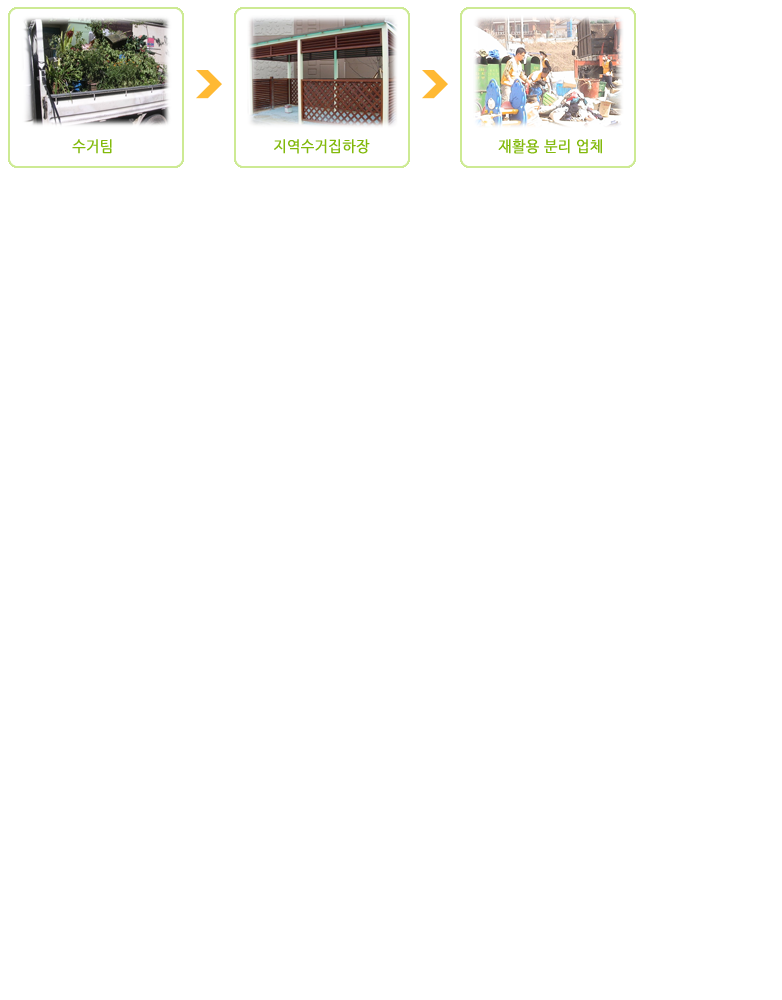
<style>
.page{position:relative;width:782px;height:1000px;background:#ffffff}
.page>*{position:absolute;margin:0}
.t1{font:15px "NanumGothic";color:#82b90b;font-weight:bold;scale:0.95 1}
</style>
<div class="page">
<p class="t1" style="left:72px;top:139px;width:40px;height:15px">수거팀</p>
<p class="t1" style="left:274px;top:139px;width:96px;height:15px">지역수거집하장</p>
<p class="t1" style="left:498px;top:139px;width:104px;height:15px">재활용 분리 업체</p>
</div>
